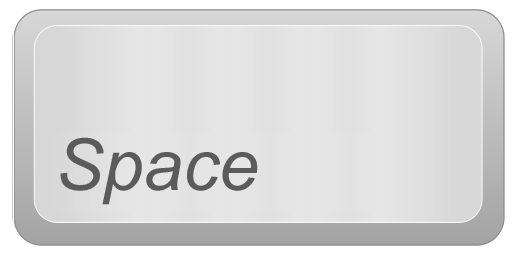
<style>
.page{position:relative;width:512px;height:256px}
.page>*{position:absolute;margin:0}
.t1{font:72px "Arial-ItalicMT";color:#5b5b5b}
</style>
<div class="page">
<p class="t1" style="left:60px;top:137px;width:198px;height:68px">Space</p>
</div>
